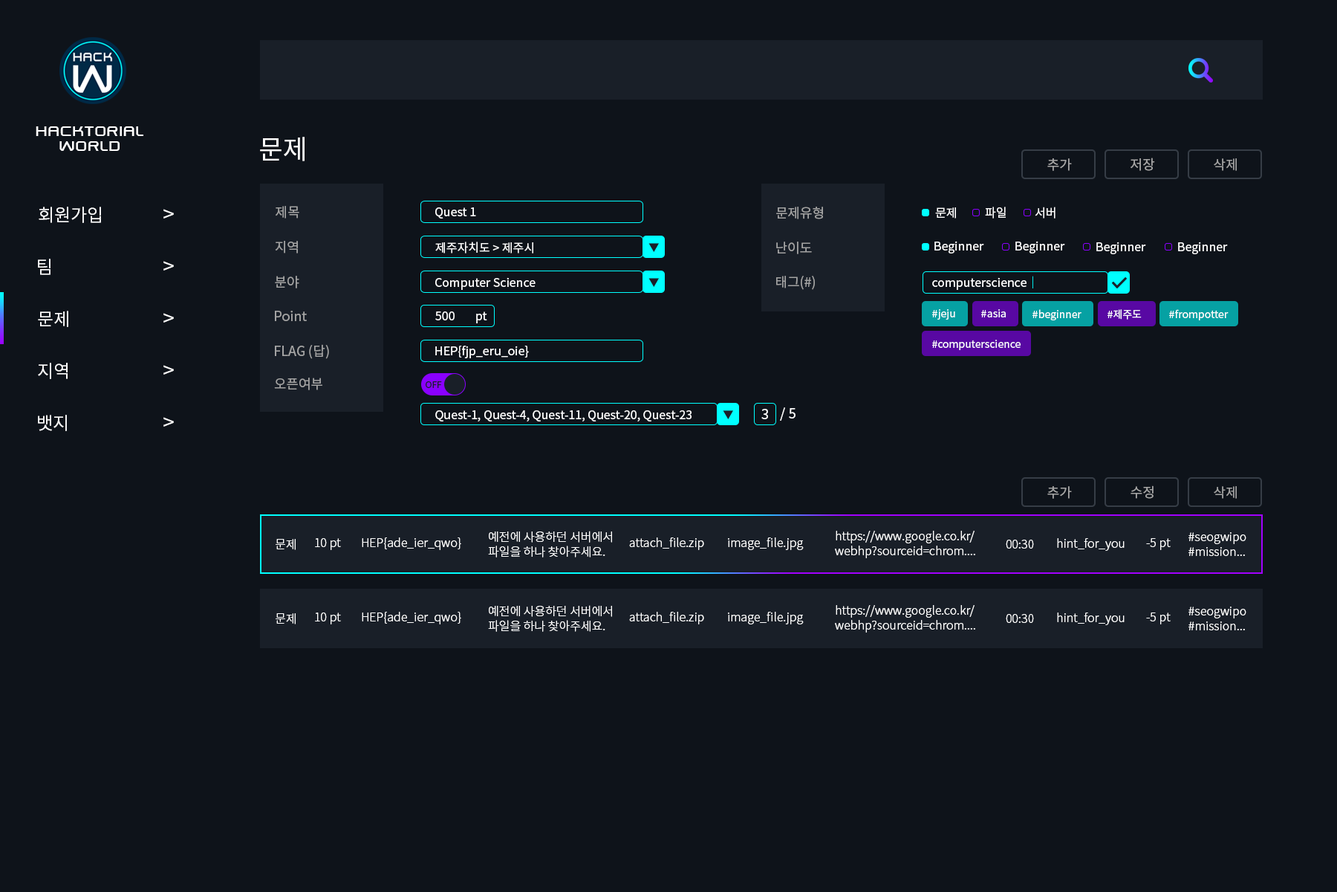
<style>
.page{position:relative;width:1337px;height:892px;background:#0e131a}
.page>*{position:absolute;margin:0}
.t1{font:17.8px/14.9px "SwiszRegular";color:#ffffff}
.t2{font:26.7px "NotoSansCJKkr-Regular";color:#ffffff}
.t3{font:13.4px "NotoSansCJKkr-Regular";color:#a6a6a6}
.t4{font:13.4px "NotoSansCJKkr-Regular";color:#a3a3a3}
.t5{font:17.8px "NotoSansCJKkr-Regular";color:#ffffff}
.t6{font:20.8px "NotoSansCJKkr-Regular";color:#ffffff}
.t7{font:11.9px "NotoSansCJKkr-Regular";color:#ffffff}
.t8{font:10.4px "NotoSansCJKkr-Regular";color:#191f28}
.t9{font:11.9px "NotoSansCJKkr-Regular";color:#00ffff}
.t10{font:10.4px "NotoSansCJKkr-Regular";color:#ffffff}
.t11{font:8.9px "NotoSansCJKkr-Regular";color:#191f28}
.t12{font:13.4px "NotoSansCJKkr-Regular";color:#ffffff}
.t13{font:11.9px/14.9px "NotoSansCJKkr-Light";color:#ffffff}
.t14{font:11.9px "NotoSansCJKkr-Light";color:#ffffff}
</style>
<div class="page">
<p class="t1" style="left:36px;top:126px;width:107px;height:25px;text-align:center">hacktorial<br>world</p>
<p class="t2" style="left:260px;top:137px;width:45px;height:24px">문제</p>
<p class="t3" style="left:1048px;top:158px;width:24px;height:13px">추가</p>
<p class="t3" style="left:1131px;top:158px;width:24px;height:13px">저장</p>
<p class="t4" style="left:1214px;top:158px;width:23px;height:13px">삭제</p>
<p class="t5" style="left:39px;top:207px;width:62px;height:16px">회원가입</p>
<p class="t6" style="left:163px;top:209px;width:11px;height:9px">&gt;</p>
<p class="t4" style="left:276px;top:206px;width:23px;height:12px">제목</p>
<p class="t7" style="left:435px;top:207px;width:41px;height:11px">Quest 1</p>
<p class="t4" style="left:776px;top:207px;width:47px;height:12px">문제유형</p>
<p class="t7" style="left:935px;top:207px;width:21px;height:11px">문제</p>
<p class="t7" style="left:985px;top:207px;width:21px;height:11px">파일</p>
<p class="t7" style="left:1035px;top:207px;width:21px;height:11px">서버</p>
<p class="t4" style="left:275px;top:241px;width:23px;height:12px">지역</p>
<p class="t7" style="left:435px;top:241px;width:98px;height:12px">제주자치도 &gt; 제주시</p>
<p class="t8" style="left:649px;top:243px;width:10px;height:9px">▼</p>
<p class="t4" style="left:776px;top:241px;width:36px;height:13px">난이도</p>
<p class="t7" style="left:935px;top:241px;width:49px;height:12px">Beginner</p>
<p class="t7" style="left:1016px;top:241px;width:49px;height:12px">Beginner</p>
<p class="t7" style="left:1097px;top:241px;width:49px;height:13px">Beginner</p>
<p class="t7" style="left:1178px;top:241px;width:50px;height:13px">Beginner</p>
<p class="t5" style="left:38px;top:259px;width:13px;height:16px">팀</p>
<p class="t6" style="left:163px;top:261px;width:11px;height:9px">&gt;</p>
<p class="t4" style="left:275px;top:276px;width:24px;height:12px">분야</p>
<p class="t7" style="left:435px;top:277px;width:101px;height:13px">Computer Science</p>
<p class="t8" style="left:649px;top:278px;width:10px;height:9px">▼</p>
<p class="t4" style="left:776px;top:276px;width:39px;height:14px">태그(#)</p>
<p class="t7" style="left:932px;top:276px;width:102px;height:14px">computerscience<span class="t9">｜</span></p>
<p class="t5" style="left:38px;top:311px;width:30px;height:16px">문제</p>
<p class="t6" style="left:163px;top:313px;width:11px;height:9px">&gt;</p>
<p class="t4" style="left:275px;top:311px;width:32px;height:10px">Point</p>
<p class="t7" style="left:435px;top:311px;width:20px;height:9px">500</p>
<p class="t7" style="left:476px;top:311px;width:11px;height:12px">pt</p>
<p class="t10" style="left:932px;top:309px;width:24px;height:10px">#jeju</p>
<p class="t10" style="left:982px;top:309px;width:24px;height:8px">#asia</p>
<p class="t10" style="left:1033px;top:309px;width:49px;height:11px">#beginner</p>
<p class="t10" style="left:1108px;top:309px;width:34px;height:10px">#제주도</p>
<p class="t10" style="left:1169px;top:309px;width:60px;height:11px">#frompotter</p>
<p class="t10" style="left:932px;top:340px;width:89px;height:10px">#computerscience</p>
<p class="t4" style="left:275px;top:344px;width:54px;height:15px">FLAG (답)</p>
<p class="t7" style="left:435px;top:345px;width:94px;height:13px">HEP{fjp_eru_oie}</p>
<p class="t5" style="left:38px;top:363px;width:30px;height:16px">지역</p>
<p class="t6" style="left:163px;top:365px;width:11px;height:9px">&gt;</p>
<p class="t4" style="left:274px;top:377px;width:48px;height:13px">오픈여부</p>
<p class="t11" style="left:426px;top:381px;width:16px;height:7px">OFF</p>
<p class="t7" style="left:435px;top:410px;width:257px;height:11px">Quest-1, Quest-4, Quest-11, Quest-20, Quest-23</p>
<p class="t8" style="left:723px;top:410px;width:10px;height:9px">▼</p>
<p class="t12" style="left:762px;top:409px;width:6px;height:10px">3</p>
<p class="t12" style="left:780px;top:407px;width:16px;height:14px">/ 5</p>
<p class="t5" style="left:38px;top:415px;width:29px;height:16px">뱃지</p>
<p class="t6" style="left:163px;top:417px;width:11px;height:9px">&gt;</p>
<p class="t3" style="left:1048px;top:486px;width:24px;height:13px">추가</p>
<p class="t3" style="left:1131px;top:485px;width:23px;height:14px">수정</p>
<p class="t4" style="left:1214px;top:486px;width:23px;height:13px">삭제</p>
<p class="t13" style="left:488px;top:531px;width:124px;height:26px">예전에 사용하던 서버에서 <br>파일을 하나 찾아주세요.</p>
<p class="t13" style="left:835px;top:531px;width:141px;height:27px">https://www.google.co.kr/<br>webhp?sourceid=chrom....</p>
<p class="t13" style="left:1189px;top:532px;width:58px;height:24px">#seogwipo<br>#mission...</p>
<p class="t14" style="left:276px;top:539px;width:20px;height:11px">문제</p>
<p class="t14" style="left:315px;top:538px;width:26px;height:12px">10 pt</p>
<p class="t14" style="left:362px;top:537px;width:99px;height:13px">HEP{ade_ier_qwo}</p>
<p class="t14" style="left:629px;top:537px;width:75px;height:13px">attach_file.zip</p>
<p class="t14" style="left:728px;top:537px;width:76px;height:13px">image_file.jpg</p>
<p class="t14" style="left:1006px;top:539px;width:28px;height:9px">00:30</p>
<p class="t14" style="left:1057px;top:538px;width:68px;height:13px">hint_for_you</p>
<p class="t14" style="left:1146px;top:538px;width:25px;height:12px">-5 pt</p>
<p class="t13" style="left:488px;top:605px;width:124px;height:27px">예전에 사용하던 서버에서 <br>파일을 하나 찾아주세요.</p>
<p class="t13" style="left:835px;top:605px;width:141px;height:27px">https://www.google.co.kr/<br>webhp?sourceid=chrom....</p>
<p class="t14" style="left:276px;top:613px;width:20px;height:11px">문제</p>
<p class="t14" style="left:315px;top:612px;width:26px;height:12px">10 pt</p>
<p class="t14" style="left:362px;top:611px;width:99px;height:13px">HEP{ade_ier_qwo}</p>
<p class="t14" style="left:629px;top:611px;width:75px;height:13px">attach_file.zip</p>
<p class="t14" style="left:728px;top:611px;width:76px;height:13px">image_file.jpg</p>
<p class="t14" style="left:1006px;top:614px;width:28px;height:9px">00:30</p>
<p class="t14" style="left:1057px;top:612px;width:68px;height:13px">hint_for_you</p>
<p class="t14" style="left:1146px;top:612px;width:25px;height:12px">-5 pt</p>
<p class="t13" style="left:1189px;top:606px;width:58px;height:24px">#seogwipo<br>#mission...</p>
</div>
